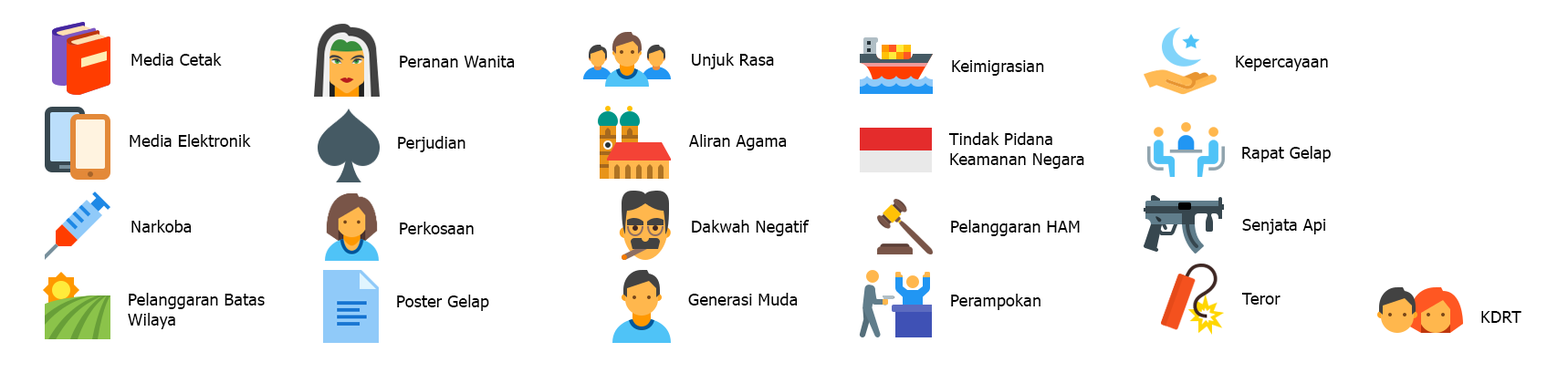
<style>
.page{position:relative;width:1568px;height:373px;background:#ffffff}
.page>*{position:absolute;margin:0}
.t1{font:16.7px "Tahoma";color:#000000}
</style>
<div class="page">
<p class="t1" style="left:131px;top:53px;width:91px;height:13px">Media Cetak</p>
<p class="t1" style="left:692px;top:53px;width:82px;height:16px">Unjuk Rasa</p>
<p class="t1" style="left:400px;top:56px;width:115px;height:12px">Peranan Wanita</p>
<p class="t1" style="left:952px;top:60px;width:92px;height:16px">Keimigrasian</p>
<p class="t1" style="left:1236px;top:56px;width:92px;height:15px">Kepercayaan</p>
<p class="t1" style="left:130px;top:134px;width:121px;height:13px">Media Elektronik</p>
<p class="t1" style="left:398px;top:136px;width:67px;height:16px">Perjudian</p>
<p class="t1" style="left:689px;top:134px;width:98px;height:17px">Aliran Agama</p>
<p class="t1" style="left:948px;top:132px;width:136px;height:37px">Tindak Pidana <br>Keamanan Negara</p>
<p class="t1" style="left:1242px;top:146px;width:89px;height:16px">Rapat Gelap</p>
<p class="t1" style="left:131px;top:220px;width:61px;height:13px">Narkoba</p>
<p class="t1" style="left:400px;top:222px;width:74px;height:13px">Perkosaan</p>
<p class="t1" style="left:692px;top:220px;width:118px;height:16px">Dakwah Negatif</p>
<p class="t1" style="left:951px;top:220px;width:129px;height:16px">Pelanggaran HAM</p>
<p class="t1" style="left:1242px;top:219px;width:84px;height:16px">Senjata Api</p>
<p class="t1" style="left:128px;top:293px;width:137px;height:36px">Pelanggaran Batas<br>Wilaya</p>
<p class="t1" style="left:688px;top:293px;width:110px;height:13px">Generasi Muda</p>
<p class="t1" style="left:951px;top:294px;width:89px;height:16px">Perampokan</p>
<p class="t1" style="left:1241px;top:293px;width:40px;height:12px">Teror</p>
<p class="t1" style="left:397px;top:295px;width:92px;height:16px">Poster Gelap</p>
<p class="t1" style="left:1481px;top:311px;width:40px;height:12px">KDRT</p>
</div>
